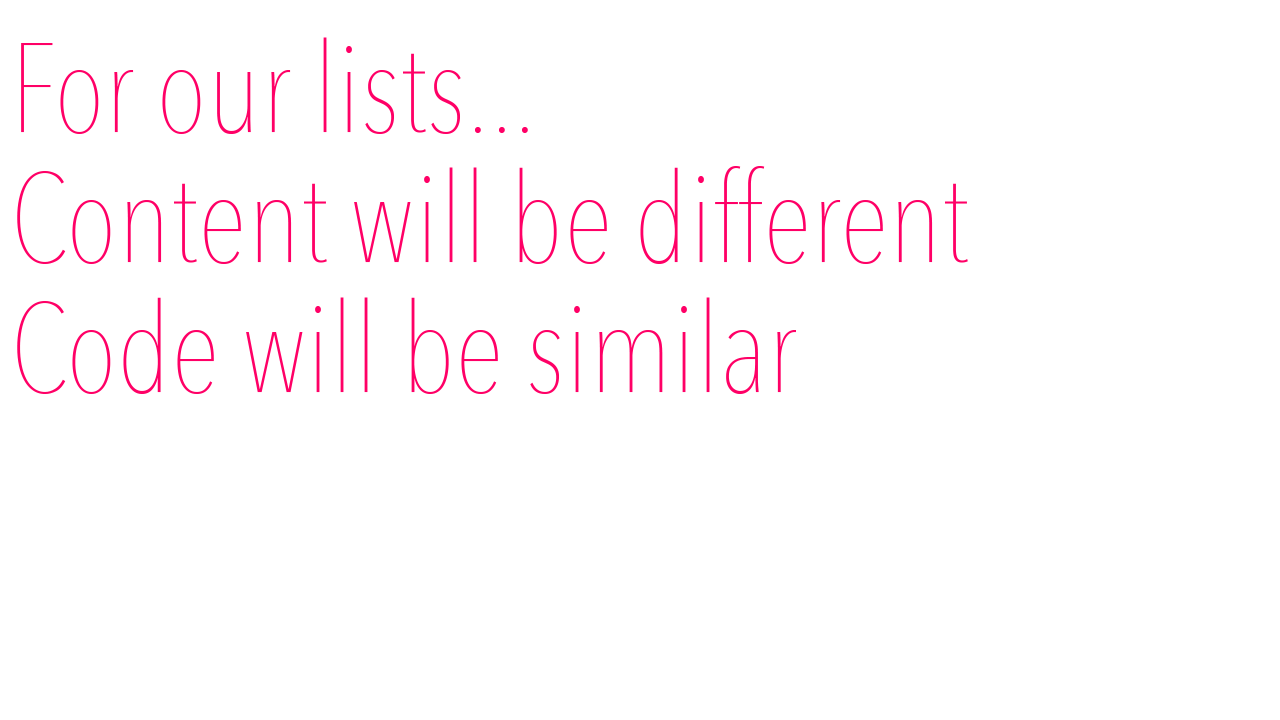
<style>
.page{position:relative;width:1280px;height:720px;background:#ffffff}
.page>*{position:absolute;margin:0}
.t1{font:125px "AvenirNextCondensed-UltraLight";color:#ff0066}
</style>
<div class="page">
<p class="t1" style="left:17px;top:37px;width:951px;height:357px">For our lists...<br>Content will be different<br>Code will be similar</p>
</div>
